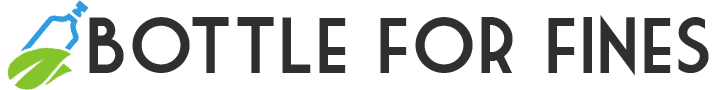
<style>
.page{position:relative;width:726px;height:90px;background:#ffffff}
.page>*{position:absolute;margin:0}
.t1{font:77.3px "MarketDeco";color:#2f2f2f}
</style>
<div class="page">
<p class="t1" style="left:89px;top:15px;width:620px;height:61px">Bottle for fines</p>
</div>
